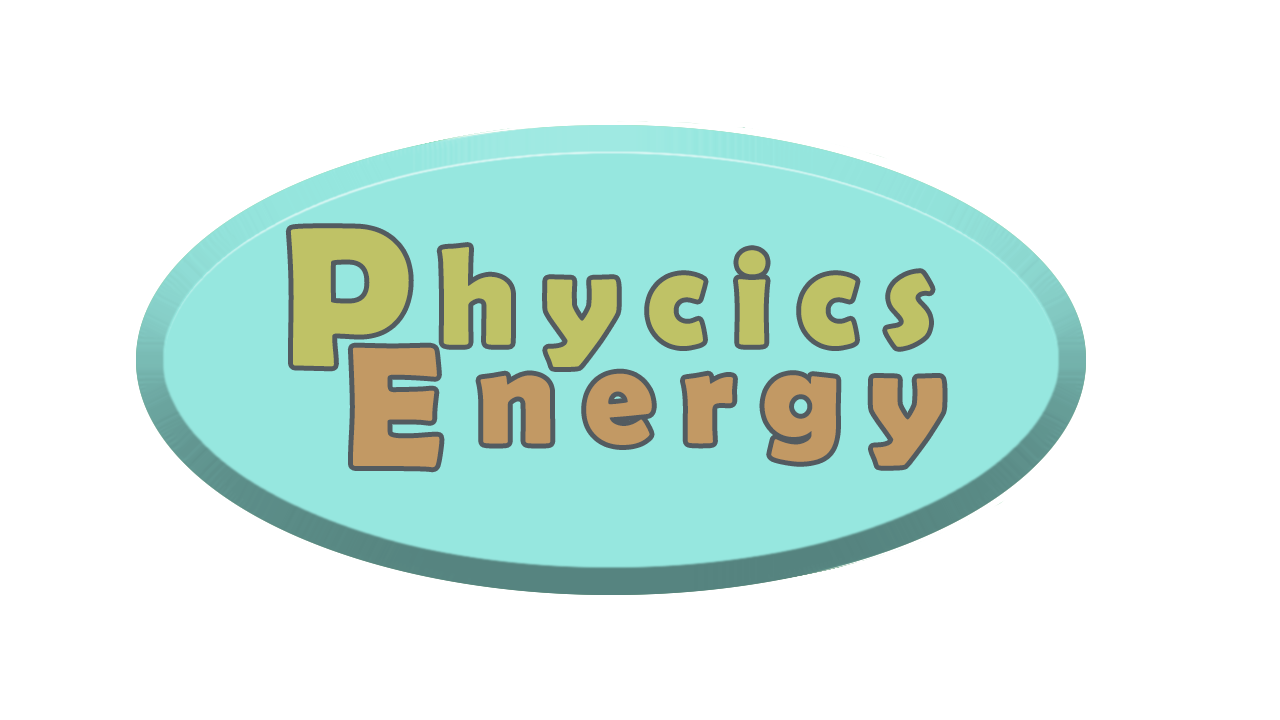
<style>
.page{position:relative;width:1280px;height:720px;background:#ffffff}
.page>*{position:absolute;margin:0}
.t1{font:200px "BerlinSansFBDemi-Bold";letter-spacing:0.2em;color:#bfc266}
.t2{font:139.3px "BerlinSansFBDemi-Bold";letter-spacing:0.2em;color:#bfc266}
.t3{font:171.9px "BerlinSansFBDemi-Bold";letter-spacing:0.2em;color:#c29964}
.t4{font:139.3px "BerlinSansFBDemi-Bold";letter-spacing:0.2em;color:#c29964}
</style>
<div class="page">
<p class="t1" style="left:290px;top:228px;width:119px;height:139px">P</p>
<p class="t2" style="left:441px;top:247px;width:490px;height:120px">hycics</p>
<p class="t3" style="left:352px;top:347px;width:88px;height:121px">E</p>
<p class="t4" style="left:480px;top:373px;width:463px;height:93px">nergy</p>
</div>
